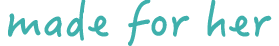
<style>
.page{position:relative;width:279px;height:46px;background:#ffffff}
.page>*{position:absolute;margin:0}
.t1{font:48px "HanziPenTC-W5";color:#3fb0ac}
</style>
<div class="page">
<p class="t1" style="left:8px;top:0px;width:264px;height:46px">made for her</p>
</div>
